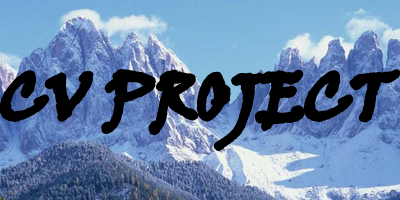
<style>
.page{position:relative;width:400px;height:200px}
.page>*{position:absolute;margin:0}
.t1{font:65px "VinerHandITC";color:#000000}
</style>
<div class="page">
<p class="t1" style="left:2px;top:71px;width:396px;height:77px">CV PROJECT</p>
</div>
